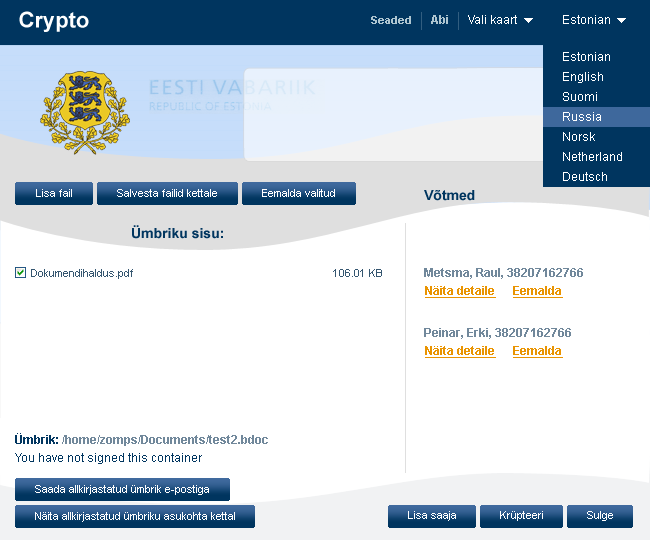
<style>
.page{position:relative;width:650px;height:540px;background:#ffffff}
.page>*{position:absolute;margin:0}
.t1{font:11px "Arial-BoldMT";color:#afc6d1}
.t2{font:12px "Arial-BoldMT";color:#afc6d1}
.t3{font:12px "ArialMT";color:#ffffff}
.t4{font:12px/20px "ArialMT";color:#ffffff}
.t5{font:11px "ArialMT";color:#ffffff}
.t6{font:14px "Arial-BoldMT";color:#00355f}
.t7{font:11px "ArialMT";color:#355670}
.t8{font:12px "Arial-BoldMT";color:#71889b}
.t9{font:12px "Arial-BoldMT";color:#e99401;text-decoration:underline}
.t10{font:12px/18px "ArialMT";color:#00355f}
.t11{font:12px/18px "Arial-BoldMT";color:#00355f}
.t12{font:12px/18px "Arial-BoldMT";color:#71889b}
</style>
<div class="page">
<p class="t1" style="left:371px;top:16px;width:40px;height:8px">Seaded</p>
<p class="t2" style="left:431px;top:15px;width:17px;height:9px">Abi</p>
<p class="t3" style="left:468px;top:15px;width:49px;height:9px">Vali kaart</p>
<p class="t3" style="left:563px;top:15px;width:47px;height:9px">Estonian</p>
<p class="t4" style="left:563px;top:52px;width:59px;height:129px">Estonian<br>English<br>Suomi<br>Russia<br>Norsk<br>Netherland<br>Deutsch</p>
<p class="t5" style="left:36px;top:189px;width:36px;height:8px">Lisa fail</p>
<p class="t5" style="left:117px;top:189px;width:100px;height:8px">Salvesta failid kettale</p>
<p class="t5" style="left:262px;top:189px;width:73px;height:8px">Eemalda valitud</p>
<p class="t6" style="left:424px;top:190px;width:51px;height:11px">Võtmed</p>
<p class="t6" style="left:132px;top:225px;width:91px;height:14px">Ümbriku sisu:</p>
<p class="t7" style="left:31px;top:269px;width:102px;height:10px">Dokumendihaldus.pdf</p>
<p class="t7" style="left:333px;top:269px;width:49px;height:8px">106.01 KB</p>
<p class="t8" style="left:424px;top:268px;width:159px;height:11px">Metsma, Raul, 38207162766</p>
<p class="t9" style="left:425px;top:286px;width:138px;height:12px">Näita detaile      Eemalda</p>
<p class="t8" style="left:424px;top:328px;width:147px;height:11px">Peinar, Erki, 38207162766</p>
<p class="t9" style="left:425px;top:346px;width:138px;height:12px">Näita detaile      Eemalda</p>
<p class="t10" style="left:15px;top:433px;width:253px;height:31px"><span class="t11">Ümbrik: </span><span class="t12">/home/zomps/Documents/test2.bdoc<br></span>You have not signed this container</p>
<p class="t5" style="left:35px;top:485px;width:174px;height:10px">Saada allkirjastatud ümbrik e-postiga</p>
<p class="t5" style="left:35px;top:512px;width:200px;height:10px">Näita allkirjastatud ümbriku asukohta kettal</p>
<p class="t5" style="left:408px;top:511px;width:48px;height:10px">Lisa saaja</p>
<p class="t5" style="left:500px;top:511px;width:43px;height:10px">Krüpteeri</p>
<p class="t5" style="left:587px;top:511px;width:26px;height:10px">Sulge</p>
</div>
